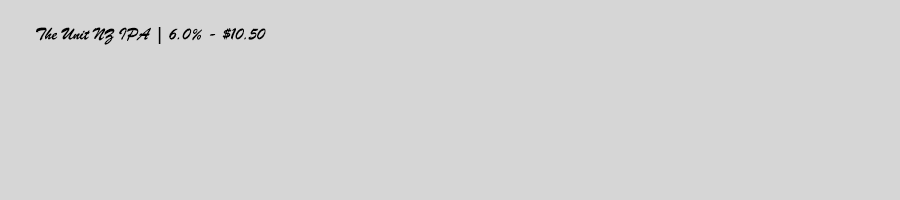
<style>
.page{position:relative;width:900px;height:200px;background:#d6d6d6}
.page>*{position:absolute;margin:0}
.t1{font:18px "BrushScriptMT";color:#000000}
</style>
<div class="page">
<p class="t1" style="left:36px;top:27px;width:230px;height:18px">The Unit NZ IPA | 6.0% - $10.50</p>
</div>
